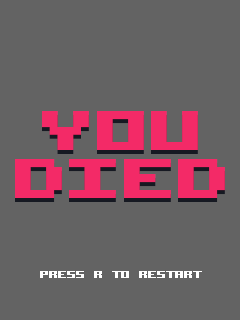
<style>
.page{position:relative;width:240px;height:320px;background:#636363}
.page>*{position:absolute;margin:0}
.t1{font:104px/48px "AcknowledgeTT-BRK-";color:#f32a67}
.t2{font:18px "AcknowledgeTT-BRK-";color:#ffffff}
</style>
<div class="page">
<p class="t1" style="left:15px;top:111px;width:210px;height:87px;text-align:center">YOU<br>DIED</p>
<p class="t1" style="left:15px;top:115px;width:210px;height:87px;text-align:center">YOU<br>DIED</p>
<p class="t2" style="left:40px;top:271px;width:162px;height:7px">PRESS R TO RESTART</p>
</div>
